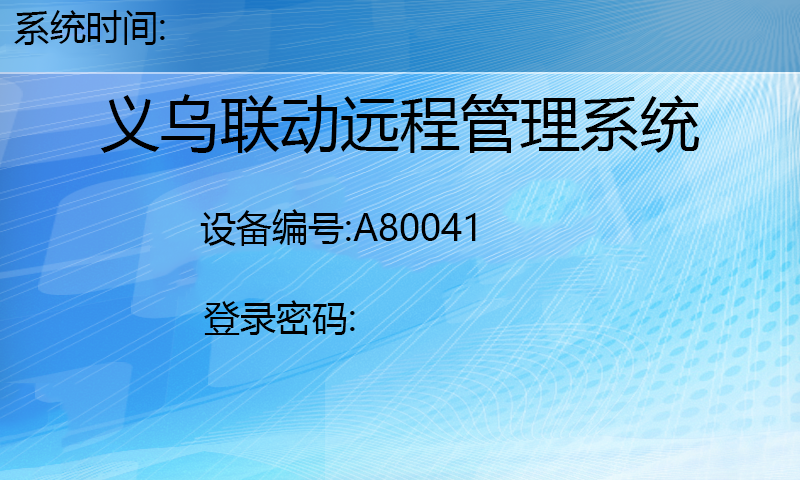
<style>
.page{position:relative;width:800px;height:480px}
.page>*{position:absolute;margin:0}
.t1{font:36px "MicrosoftYaHei";color:#000000}
.t2{font:60px "MicrosoftYaHei";color:#000000}
</style>
<div class="page">
<p class="t1" style="left:14px;top:10px;width:151px;height:35px">系统时间:</p>
<p class="t2" style="left:100px;top:94px;width:600px;height:60px">义乌联动远程管理系统</p>
<p class="t1" style="left:200px;top:209px;width:276px;height:37px">设备编号:A80041</p>
<p class="t1" style="left:204px;top:300px;width:151px;height:35px">登录密码:</p>
</div>
